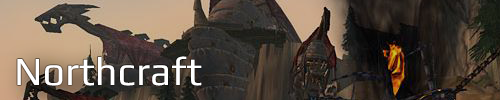
<style>
.page{position:relative;width:500px;height:100px}
.page>*{position:absolute;margin:0}
.t1{font:40px "Play-Regular";letter-spacing:0.01em;color:#ffffff;scale:0.97 1}
</style>
<div class="page">
<p class="t1" style="left:17px;top:56px;width:185px;height:30px">Northcraft</p>
</div>
